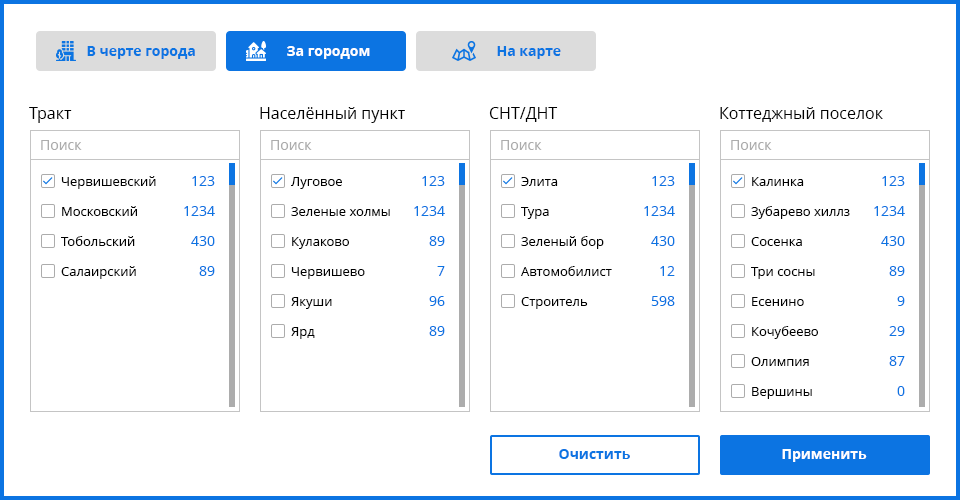
<style>
.page{position:relative;width:960px;height:500px;background:#ffffff}
.page>*{position:absolute;margin:0}
.t1{font:14px "OpenSans-Bold";color:#0c74e2}
.t2{font:14px "OpenSans-Bold";color:#ffffff}
.t3{font:16px "OpenSans";color:#000000}
.t4{font:14px "OpenSans";color:#acacac}
.t5{font:13px "OpenSans";color:#000000}
.t6{font:14px "OpenSans";color:#0c74e2}
</style>
<div class="page">
<p class="t1" style="left:87px;top:46px;width:108px;height:13px">В черте города</p>
<p class="t2" style="left:287px;top:46px;width:83px;height:13px">За городом</p>
<p class="t1" style="left:497px;top:46px;width:64px;height:13px">На карте</p>
<p class="t3" style="left:29px;top:107px;width:43px;height:16px">Тракт</p>
<p class="t3" style="left:260px;top:107px;width:145px;height:16px">Населённый пункт</p>
<p class="t3" style="left:489px;top:107px;width:69px;height:15px">СНТ/ДНТ</p>
<p class="t3" style="left:720px;top:107px;width:163px;height:15px">Коттеджный поселок</p>
<p class="t4" style="left:41px;top:140px;width:41px;height:10px">Поиск</p>
<p class="t4" style="left:271px;top:140px;width:41px;height:10px">Поиск</p>
<p class="t4" style="left:501px;top:140px;width:41px;height:10px">Поиск</p>
<p class="t4" style="left:731px;top:140px;width:41px;height:10px">Поиск</p>
<p class="t5" style="left:61px;top:176px;width:95px;height:13px">Червишевский</p>
<p class="t6" style="left:192px;top:176px;width:23px;height:10px">123</p>
<p class="t5" style="left:291px;top:177px;width:51px;height:12px">Луговое</p>
<p class="t6" style="left:422px;top:176px;width:23px;height:10px">123</p>
<p class="t5" style="left:521px;top:177px;width:37px;height:9px">Элита</p>
<p class="t6" style="left:652px;top:176px;width:23px;height:10px">123</p>
<p class="t5" style="left:752px;top:177px;width:52px;height:9px">Калинка</p>
<p class="t6" style="left:882px;top:176px;width:23px;height:10px">123</p>
<p class="t5" style="left:62px;top:206px;width:75px;height:10px">Московский</p>
<p class="t6" style="left:184px;top:206px;width:31px;height:10px">1234</p>
<p class="t5" style="left:291px;top:207px;width:99px;height:9px">Зеленые холмы</p>
<p class="t6" style="left:414px;top:206px;width:31px;height:10px">1234</p>
<p class="t5" style="left:521px;top:207px;width:28px;height:12px">Тура</p>
<p class="t6" style="left:644px;top:206px;width:31px;height:10px">1234</p>
<p class="t5" style="left:751px;top:206px;width:99px;height:13px">Зубарево хиллз</p>
<p class="t6" style="left:874px;top:206px;width:31px;height:10px">1234</p>
<p class="t5" style="left:61px;top:236px;width:74px;height:10px">Тобольский</p>
<p class="t6" style="left:191px;top:236px;width:24px;height:10px">430</p>
<p class="t5" style="left:292px;top:237px;width:57px;height:12px">Кулаково</p>
<p class="t6" style="left:429px;top:236px;width:16px;height:10px">89</p>
<p class="t5" style="left:521px;top:236px;width:83px;height:13px">Зеленый бор</p>
<p class="t6" style="left:651px;top:236px;width:24px;height:10px">430</p>
<p class="t5" style="left:751px;top:237px;width:51px;height:9px">Сосенка</p>
<p class="t6" style="left:881px;top:236px;width:24px;height:10px">430</p>
<p class="t5" style="left:61px;top:266px;width:75px;height:13px">Салаирский</p>
<p class="t6" style="left:199px;top:266px;width:16px;height:10px">89</p>
<p class="t5" style="left:291px;top:267px;width:74px;height:12px">Червишево</p>
<p class="t6" style="left:437px;top:266px;width:8px;height:10px">7</p>
<p class="t5" style="left:521px;top:266px;width:91px;height:10px">Автомобилист</p>
<p class="t6" style="left:660px;top:266px;width:15px;height:10px">12</p>
<p class="t5" style="left:751px;top:267px;width:64px;height:12px">Три сосны</p>
<p class="t6" style="left:889px;top:266px;width:16px;height:10px">89</p>
<p class="t5" style="left:291px;top:297px;width:41px;height:12px">Якуши</p>
<p class="t6" style="left:429px;top:296px;width:16px;height:10px">96</p>
<p class="t5" style="left:521px;top:297px;width:67px;height:12px">Строитель</p>
<p class="t6" style="left:651px;top:296px;width:24px;height:10px">598</p>
<p class="t5" style="left:752px;top:297px;width:52px;height:9px">Есенино</p>
<p class="t6" style="left:897px;top:296px;width:8px;height:10px">9</p>
<p class="t5" style="left:291px;top:327px;width:24px;height:12px">Ярд</p>
<p class="t6" style="left:429px;top:326px;width:16px;height:10px">89</p>
<p class="t5" style="left:752px;top:326px;width:66px;height:13px">Кочубеево</p>
<p class="t6" style="left:889px;top:326px;width:16px;height:10px">29</p>
<p class="t5" style="left:751px;top:357px;width:58px;height:9px">Олимпия</p>
<p class="t6" style="left:889px;top:356px;width:16px;height:10px">87</p>
<p class="t5" style="left:752px;top:387px;width:60px;height:12px">Вершины</p>
<p class="t6" style="left:897px;top:386px;width:8px;height:10px">0</p>
<p class="t1" style="left:559px;top:449px;width:71px;height:10px">Очистить</p>
<p class="t2" style="left:782px;top:449px;width:85px;height:13px">Применить</p>
</div>
